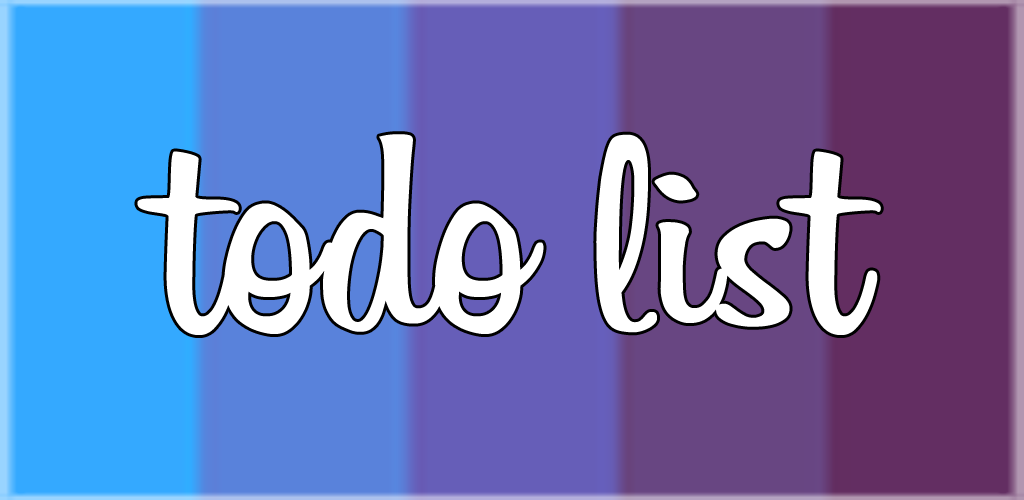
<style>
.page{position:relative;width:1024px;height:500px}
.page>*{position:absolute;margin:0}
.t1{font:285px "Billabong";color:#ffffff;scale:1.05 1}
</style>
<div class="page">
<p class="t1" style="left:137px;top:134px;width:744px;height:201px">todo list</p>
</div>
